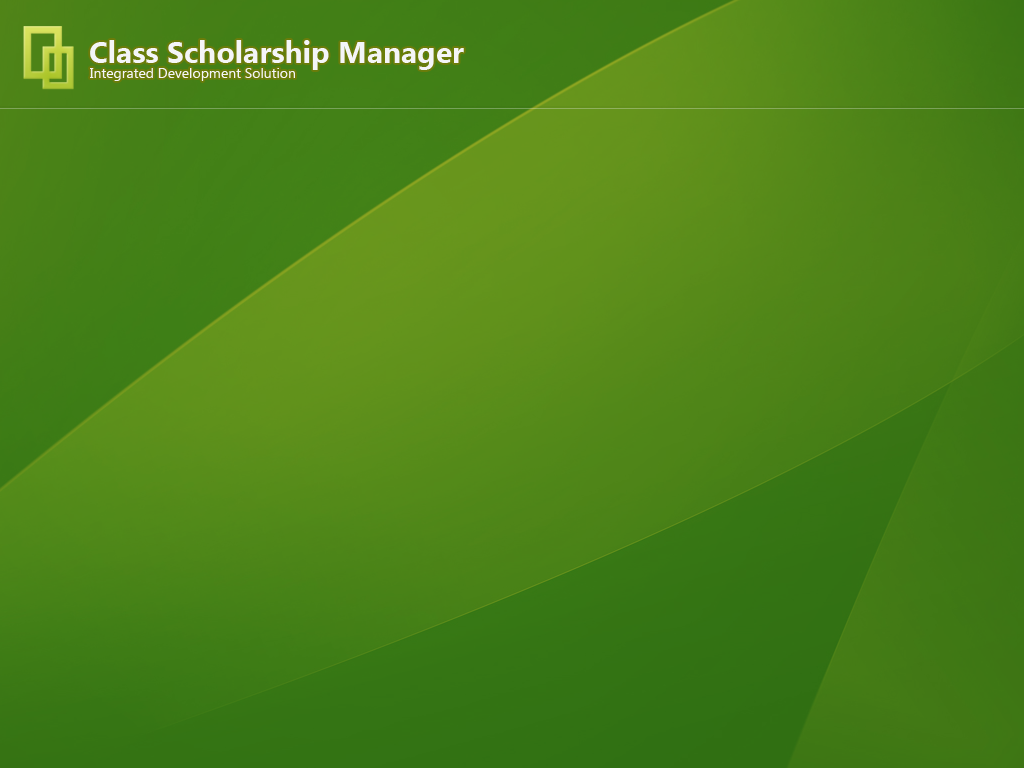
<style>
.page{position:relative;width:1024px;height:768px}
.page>*{position:absolute;margin:0}
.t1{font:30px "SegoeUI-Bold";color:#f4f5f8}
.t2{font:14px "SegoeUI";color:#f4f5f8}
</style>
<div class="page">
<p class="t1" style="left:90px;top:40px;width:374px;height:30px">Class Scholarship Manager</p>
<p class="t2" style="left:90px;top:68px;width:205px;height:13px">Integrated Development Solution</p>
</div>
